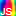
<style>
.page{position:relative;width:16px;height:16px}
.page>*{position:absolute;margin:0}
.t1{font:10px "ArialMT";color:#ffffff}
</style>
<div class="page">
<p class="t1" style="left:0px;top:8px;width:12px;height:7px">JS</p>
</div>
